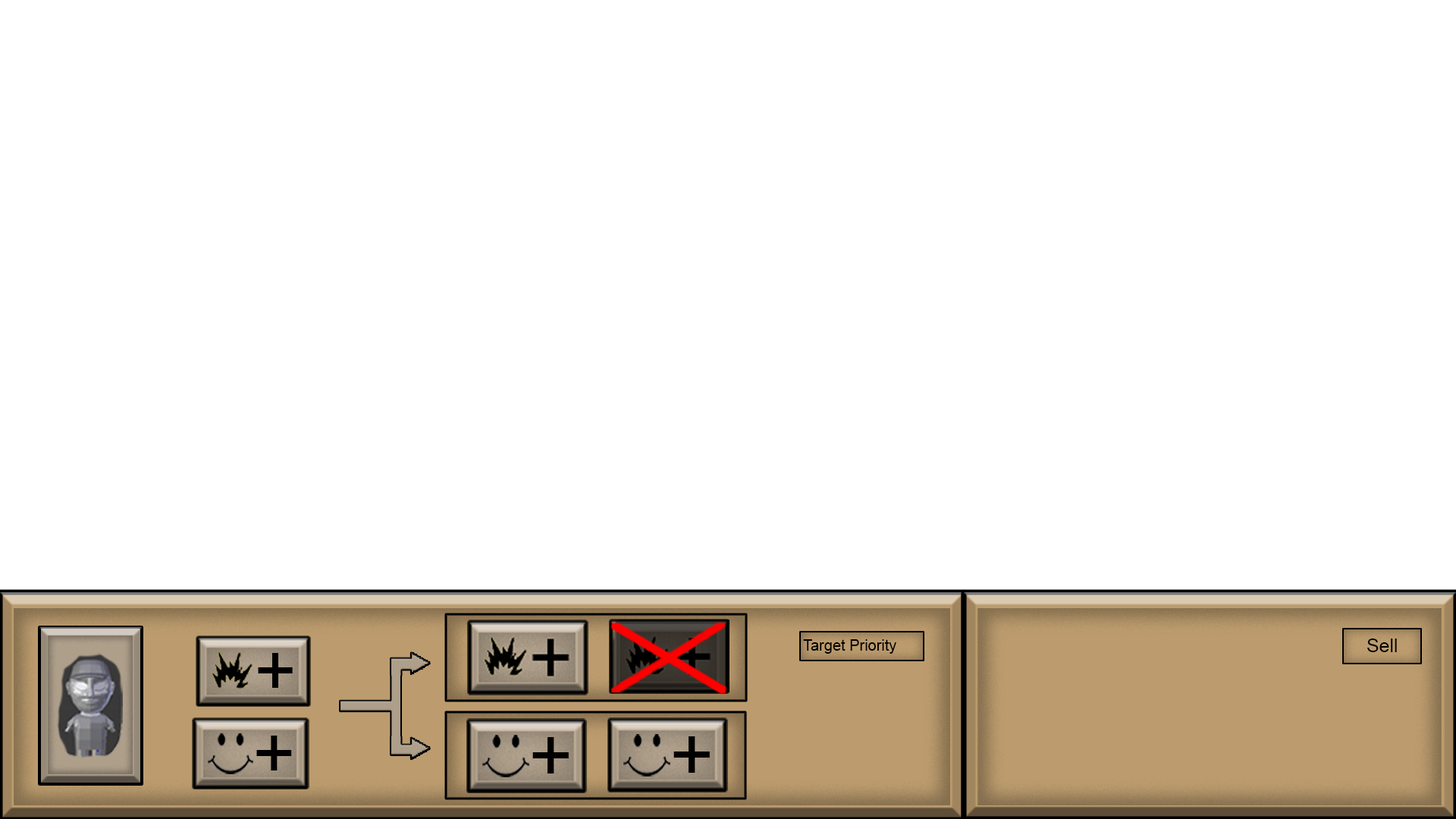
<style>
.page{position:relative;width:1456px;height:819px;background:#ffffff}
.page>*{position:absolute;margin:0}
.t1{font:15.2px "ArialMT";color:#000000}
.t2{font:19px "ArialMT";color:#000000}
.t3{font:72.9px "ArialMT";color:#000000}
.t4{font:73.6px "ArialMT";color:#000000}
.t5{font:76.1px "ArialMT";color:#000000}
</style>
<div class="page">
<p class="t1" style="left:803px;top:639px;width:93px;height:15px">Target Priority</p>
<p class="t2" style="left:1367px;top:639px;width:30px;height:13px">Sell</p>
<p class="t3" style="left:258px;top:653px;width:35px;height:35px">+</p>
<p class="t4" style="left:256px;top:736px;width:36px;height:34px">+</p>
<p class="t5" style="left:532px;top:737px;width:37px;height:36px">+</p>
<p class="t5" style="left:673px;top:736px;width:37px;height:37px">+</p>
</div>
